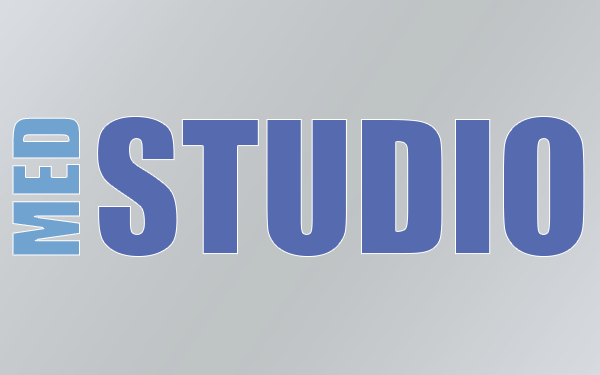
<style>
.page{position:relative;width:600px;height:375px}
.page>*{position:absolute;margin:0}
.t1{font:85.6px "Impact";color:#70a3d0;text-transform:uppercase}
.t2{font:171px "Impact";color:#566baf;text-transform:uppercase}
</style>
<div class="page">
<p class="t1" style="left:12px;top:117px;width:68px;height:139px;rotate:-90deg">Med</p>
<p class="t2" style="left:97px;top:116px;width:488px;height:141px">Studio</p>
</div>
